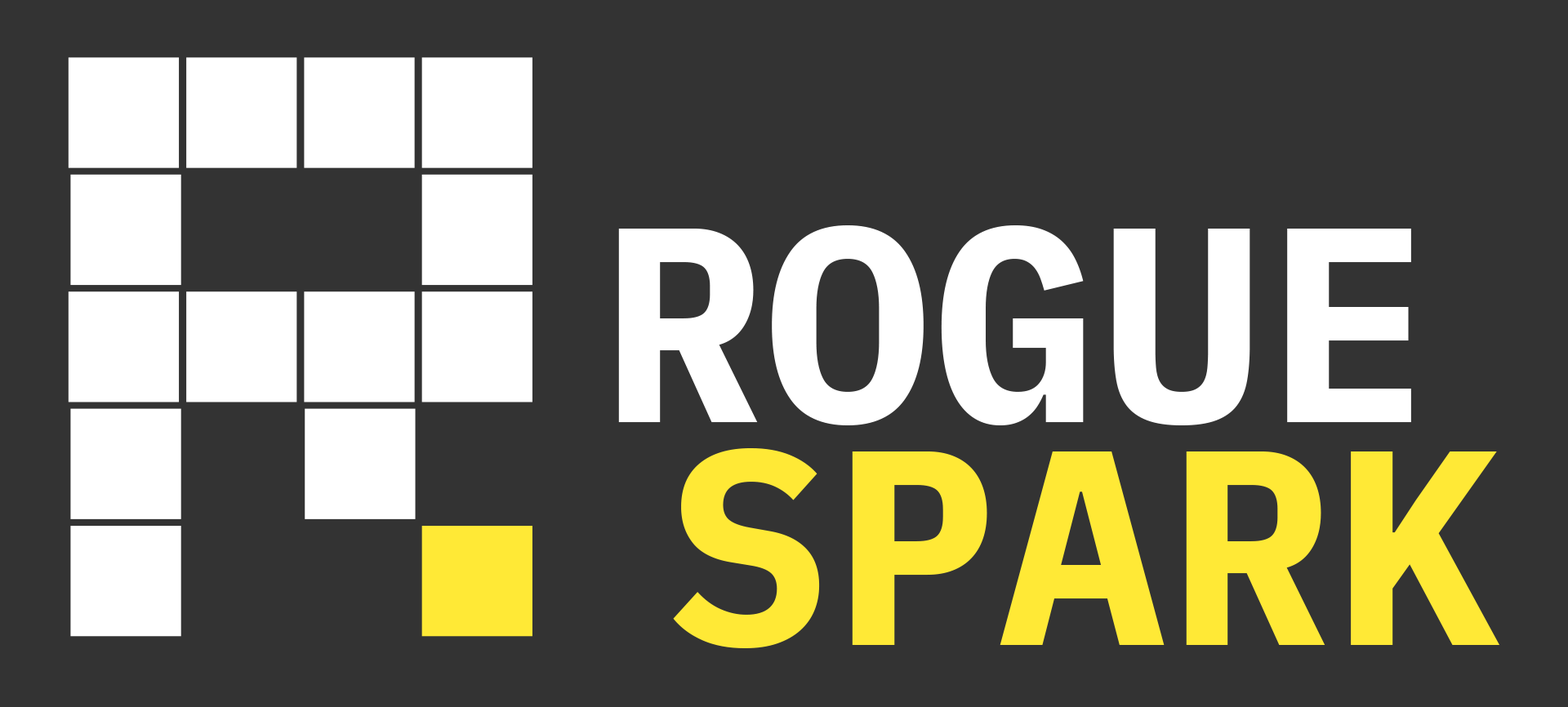
<style>
.page{position:relative;width:1568px;height:707px;background:#333333}
.page>*{position:absolute;margin:0}
.t1{font:277.9px/223.3px "IBMPlexMono-Bold";color:#ffffff;text-transform:uppercase}
.t2{font:277.9px/223.3px "IBMPlexMono-Bold";color:#ffe936;text-transform:uppercase}
</style>
<div class="page">
<p class="t1" style="left:618px;top:225px;width:882px;height:423px">Rogue<br> <span class="t2">Spark</span></p>
</div>
